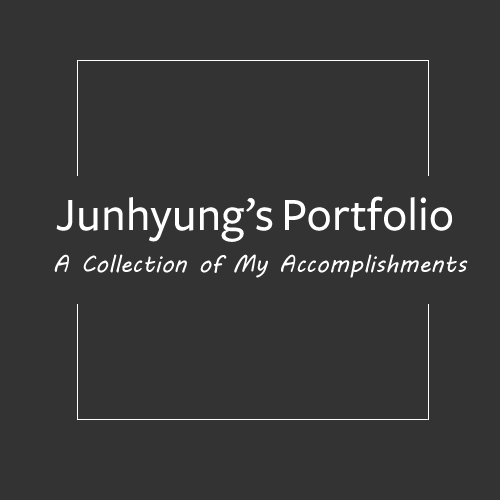
<style>
.page{position:relative;width:500px;height:500px;background:#333333}
.page>*{position:absolute;margin:0}
.t1{font:48px "Freight-SansMedium";color:#ffffff}
.t2{font:24px "MVBoli";color:#ffffff}
</style>
<div class="page">
<p class="t1" style="left:56px;top:196px;width:397px;height:46px">Junhyung’s Portfolio</p>
<p class="t2" style="left:54px;top:254px;width:414px;height:24px">A Collection of My Accomplishments</p>
</div>
